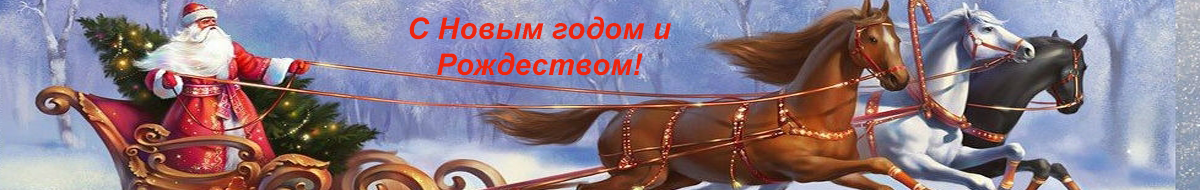
<style>
.page{position:relative;width:1200px;height:190px}
.page>*{position:absolute;margin:0}
.t1{font:30px "Arial-BoldItalicMT";color:#ed250e}
</style>
<div class="page">
<p class="t1" style="left:409px;top:16px;width:262px;height:60px;text-align:center">С Новым годом и<br>Рождеством!</p>
</div>
